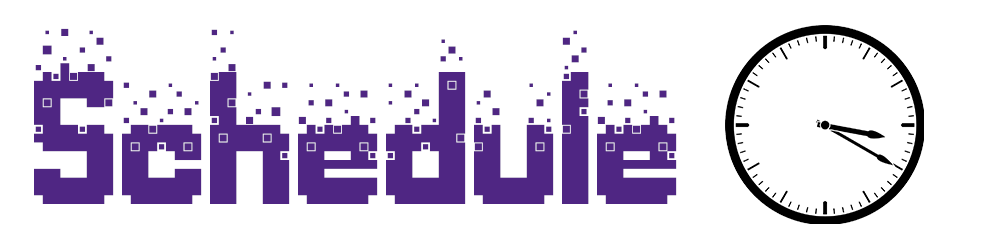
<style>
.page{position:relative;width:1000px;height:250px;background:#ffffff}
.page>*{position:absolute;margin:0}
.t1{font:220px "Nightmare-Codehack";color:#4f2683}
</style>
<div class="page">
<p class="t1" style="left:34px;top:28px;width:643px;height:176px">Schedule</p>
</div>
